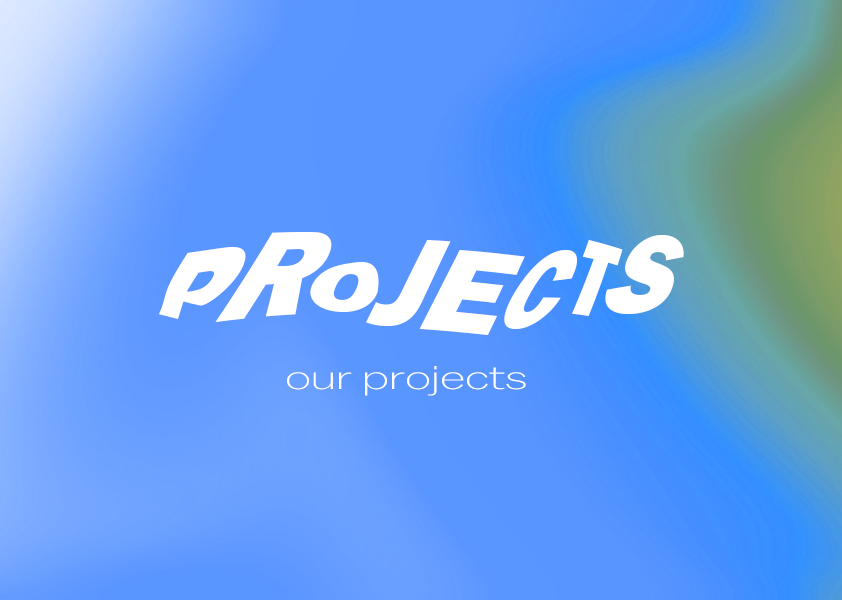
<style>
.page{position:relative;width:842px;height:600px}
.page>*{position:absolute;margin:0}
.t1{font:132.6px "Marola";color:#ffffff;scale:0.88 1}
.t2{font:33.8px "Balto-Light";color:#ffffff;scale:1.48 1}
</style>
<div class="page">
<p class="t1" style="left:159px;top:232px;width:525px;height:103px">PROJECTS</p>
<p class="t2" style="left:287px;top:366px;width:239px;height:30px">our projects</p>
</div>
